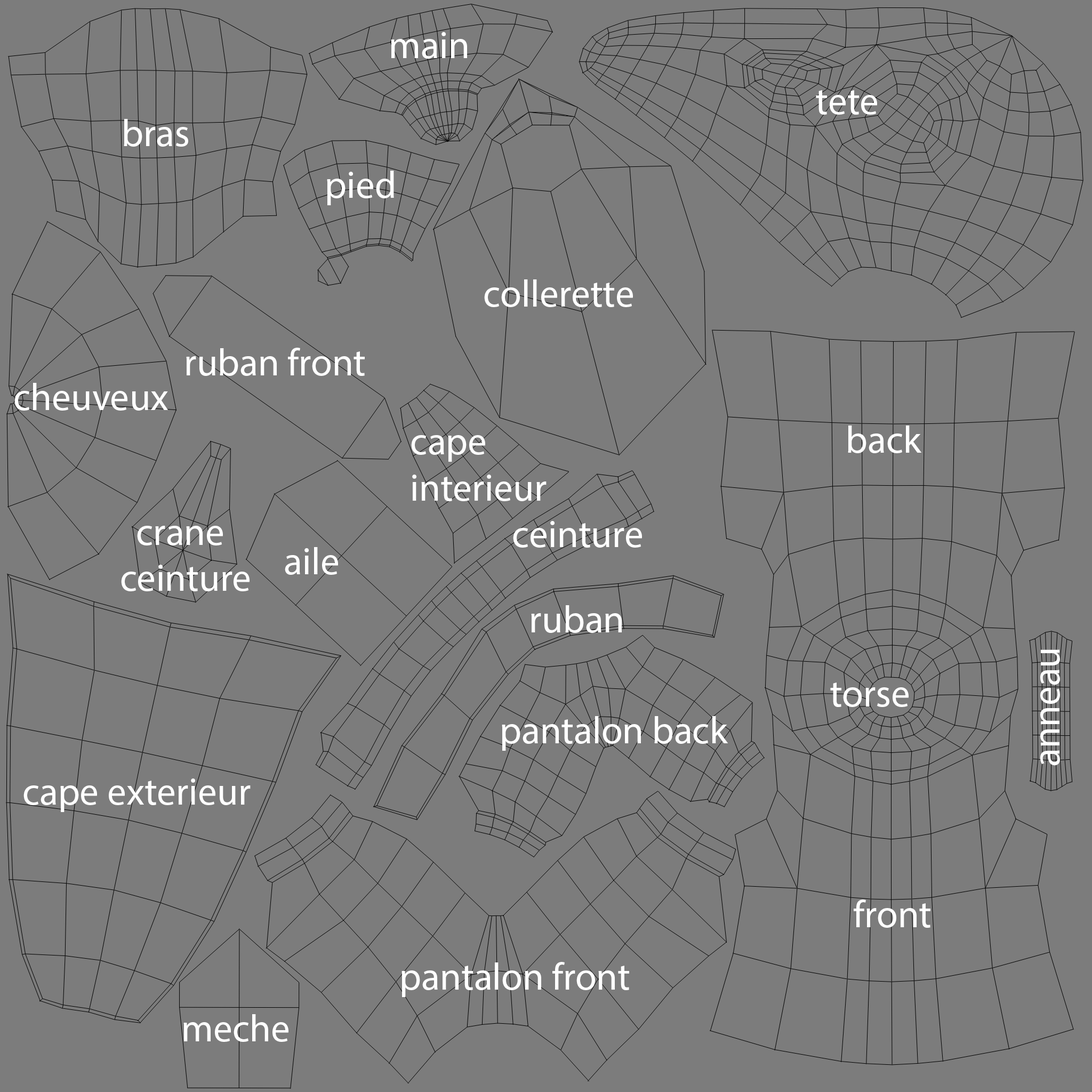
<style>
.page{position:relative;width:1092px;height:1092px;background:#7c7c7c}
.page>*{position:absolute;margin:0}
.t1{font:38.4px "MyriadPro-Regular";color:#ffffff}
.t2{font:38.3px "MyriadPro-Regular";color:#ffffff}
</style>
<div class="page">
<p class="t1" style="left:391px;top:32px;width:76px;height:27px">main</p>
<p class="t1" style="left:816px;top:90px;width:61px;height:25px">tete</p>
<p class="t1" style="left:124px;top:119px;width:64px;height:28px">bras</p>
<p class="t1" style="left:327px;top:171px;width:67px;height:34px">pied</p>
<p class="t1" style="left:484px;top:279px;width:149px;height:28px">collerette</p>
<p class="t1" style="left:186px;top:348px;width:179px;height:28px">ruban front</p>
<p class="t1" style="left:14px;top:383px;width:154px;height:28px">cheuveux</p>
<p class="t1" style="left:848px;top:425px;width:74px;height:28px">back</p>
<p class="t1" style="left:411px;top:435px;width:136px;height:66px">cape <br>interieur</p>
<p class="t1" style="left:513px;top:521px;width:129px;height:27px">ceinture</p>
<p class="t1" style="left:121px;top:526px;width:129px;height:65px">crane<br>ceinture</p>
<p class="t1" style="left:285px;top:547px;width:53px;height:28px">aile</p>
<p class="t1" style="left:531px;top:605px;width:91px;height:28px">ruban</p>
<p class="t2" style="left:1040px;top:649px;width:20px;height:117px;rotate:-90deg">anneau</p>
<p class="t1" style="left:830px;top:682px;width:79px;height:25px">torse</p>
<p class="t1" style="left:502px;top:716px;width:226px;height:35px">pantalon back</p>
<p class="t1" style="left:23px;top:778px;width:228px;height:34px">cape exterieur</p>
<p class="t1" style="left:854px;top:900px;width:76px;height:28px">front</p>
<p class="t1" style="left:401px;top:962px;width:228px;height:35px">pantalon front</p>
<p class="t1" style="left:183px;top:1014px;width:105px;height:28px">meche</p>
</div>
